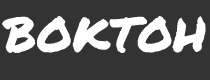
<style>
.page{position:relative;width:210px;height:80px;background:#333333}
.page>*{position:absolute;margin:0}
.t1{font:48px "PermanentMarker";color:#ffffff}
</style>
<div class="page">
<p class="t1" style="left:2px;top:16px;width:204px;height:37px">BOKTOH</p>
</div>
